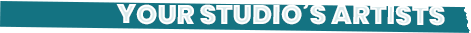
<style>
.page{position:relative;width:471px;height:33px;background:#147382}
.page>*{position:absolute;margin:0}
.t1{font:26.9px "Poppins-Black";color:#ffffff}
</style>
<div class="page">
<p class="t1" style="left:116px;top:0px;width:329px;height:26px">YOUR STUDIO’S ARTISTS</p>
</div>
